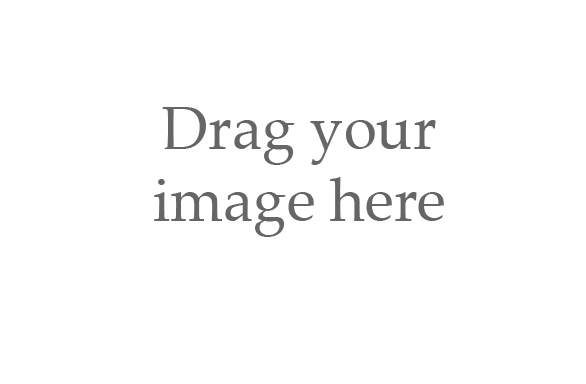
<style>
.page{position:relative;width:586px;height:384px;background:#ffffff}
.page>*{position:absolute;margin:0}
.t1{font:60px "Palatino-Roman";color:#666666}
</style>
<div class="page">
<p class="t1" style="left:154px;top:107px;width:290px;height:130px;text-align:center">Drag your image here</p>
</div>
